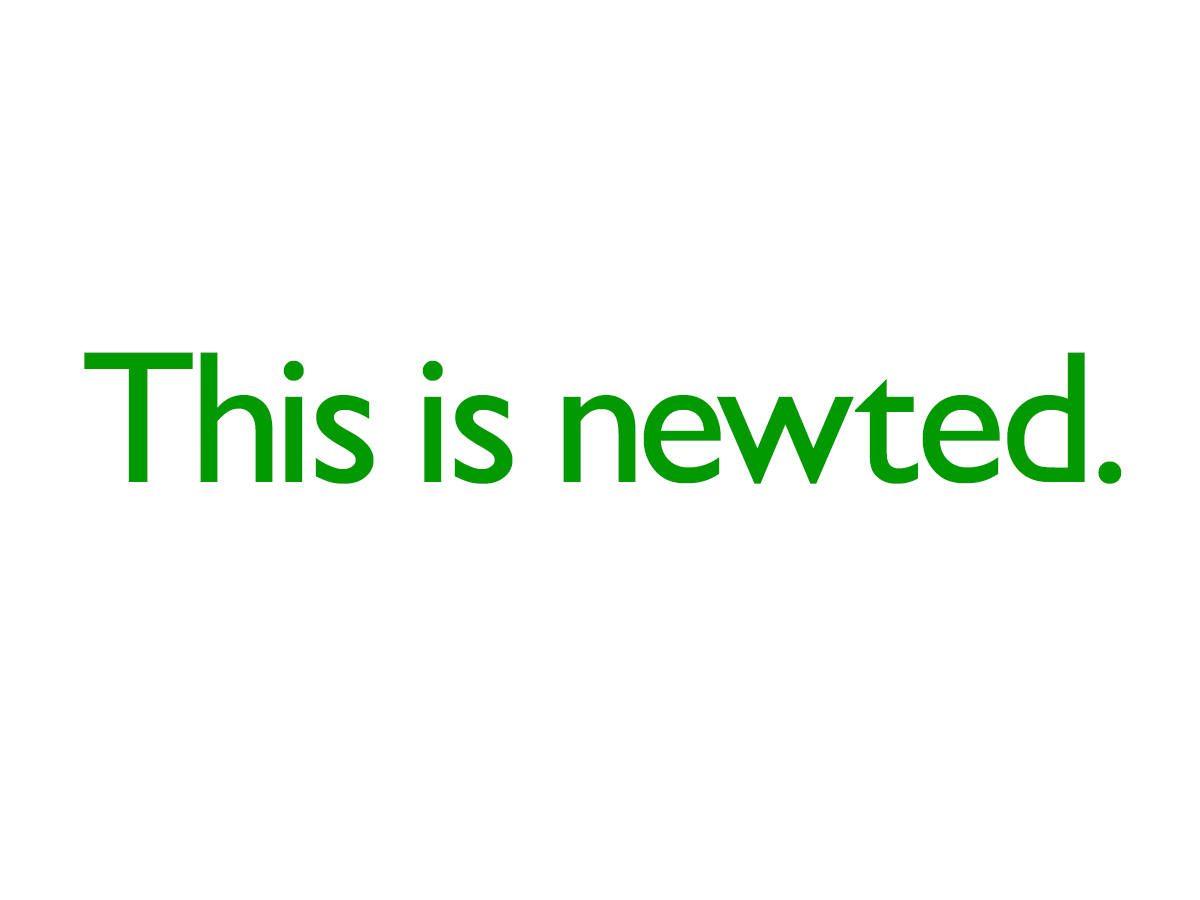
<style>
.page{position:relative;width:1200px;height:900px;background:#ffffff}
.page>*{position:absolute;margin:0}
.t1{font:190px "GillSans";letter-spacing:-0.016em;color:#009900}
</style>
<div class="page">
<p class="t1" style="left:84px;top:352px;width:1038px;height:132px">This is newted.</p>
</div>
